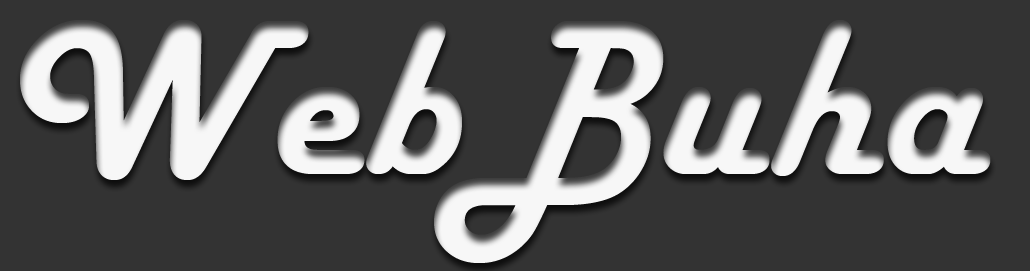
<style>
.page{position:relative;width:1030px;height:271px;background:#333333}
.page>*{position:absolute;margin:0}
.t1{font:229.2px "HarlowSolid";color:#f7f7f7}
</style>
<div class="page">
<p class="t1" style="left:20px;top:20px;width:971px;height:243px">WebBuha</p>
</div>
